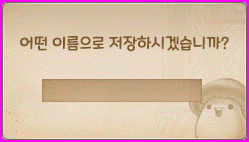
<style>
.page{position:relative;width:249px;height:142px}
.page>*{position:absolute;margin:0}
.t1{font:12px "MaplestoryLight";color:#7d5927}
</style>
<div class="page">
<p class="t1" style="left:20px;top:35px;width:209px;height:17px">어떤 이름으로 저장하시겠습니까?</p>
</div>
